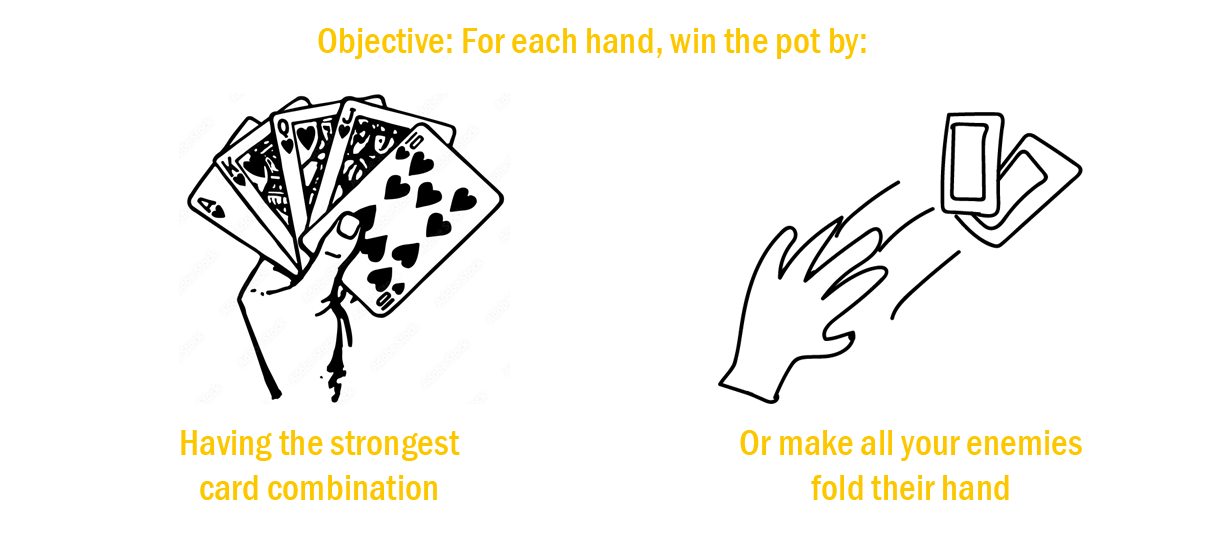
<style>
.page{position:relative;width:1224px;height:555px;background:#ffffff}
.page>*{position:absolute;margin:0}
.t1{font:37.5px "FranklinGothic-MediumCond";color:#fdc700}
</style>
<div class="page">
<p class="t1" style="left:318px;top:28px;width:548px;height:31px">Objective: For each hand, win the pot by:</p>
<p class="t1" style="left:181px;top:430px;width:279px;height:70px;text-align:center">Having the strongest<br>card combination</p>
<p class="t1" style="left:740px;top:430px;width:342px;height:70px;text-align:center">Or make all your enemies<br>fold their hand</p>
</div>
